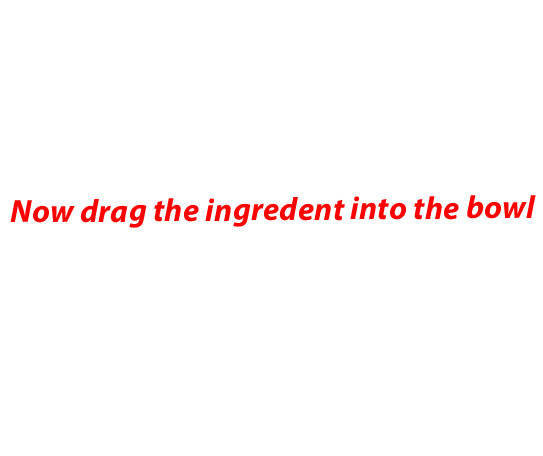
<style>
.page{position:relative;width:543px;height:456px;background:#ffffff}
.page>*{position:absolute;margin:0}
.t1{font:32.1px "MyriadPro-BoldIt";letter-spacing:0.01em;color:#ff0000}
</style>
<div class="page">
<p class="t1" style="left:10px;top:195px;width:526px;height:33px;rotate:-1deg">Now drag the ingredent into the bowl</p>
</div>
